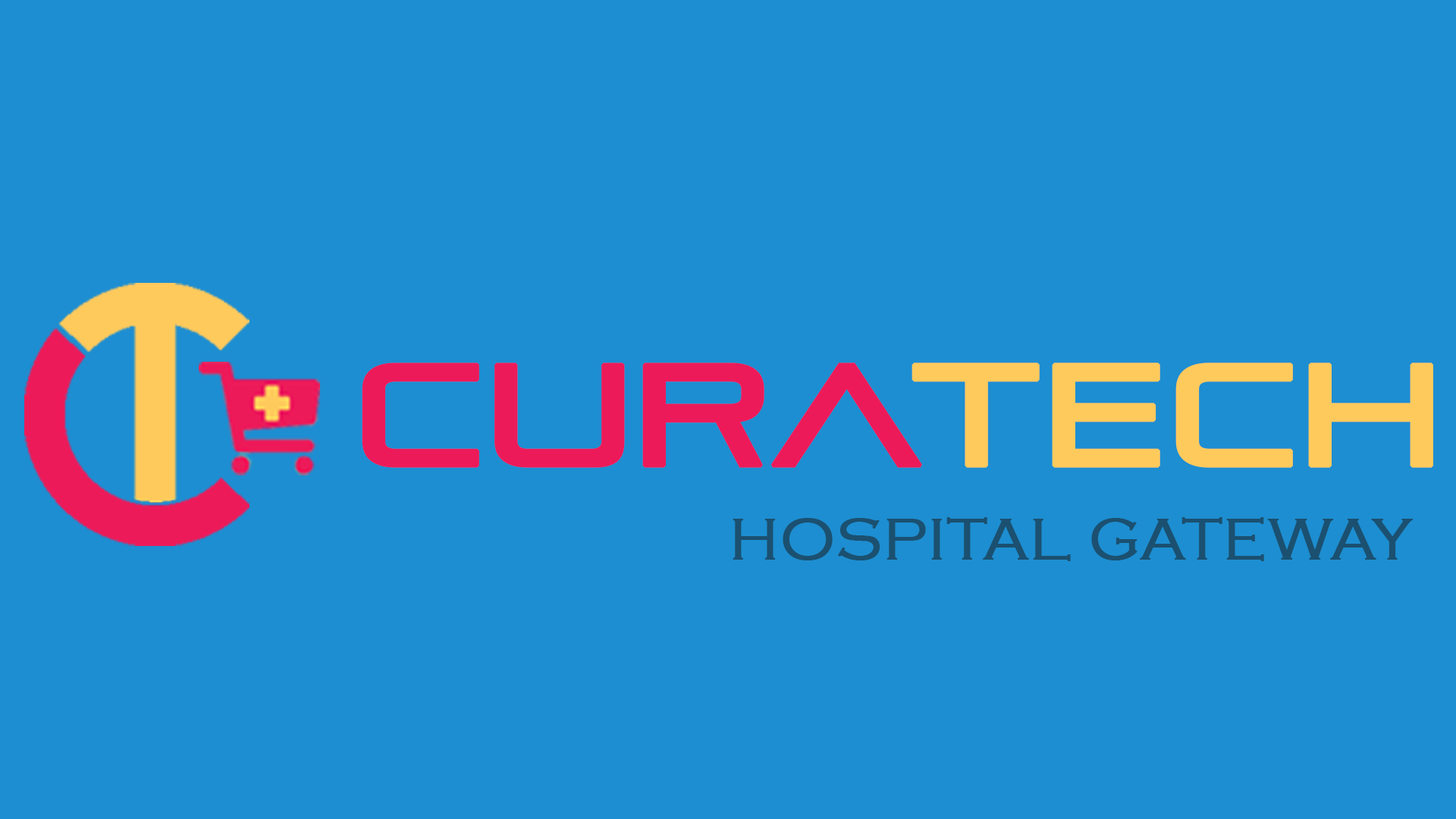
<style>
.page{position:relative;width:1456px;height:819px;background:#1d8ed1}
.page>*{position:absolute;margin:0}
.t1{font:143.6px "PirulenRg-Regular";color:#ed1a59;font-weight:bold}
.t2{font:143.6px "PirulenRg-Regular";color:#ffca5c;font-weight:bold}
.t3{font:60.2px "CopperplateGothic-Light";color:#1b5070;font-weight:bold}
</style>
<div class="page">
<p class="t1" style="left:362px;top:362px;width:560px;height:106px">CURA</p>
<p class="t2" style="left:912px;top:362px;width:521px;height:106px">TECH</p>
<p class="t3" style="left:733px;top:517px;width:680px;height:44px">HOSPITAL GATEWAY</p>
</div>
